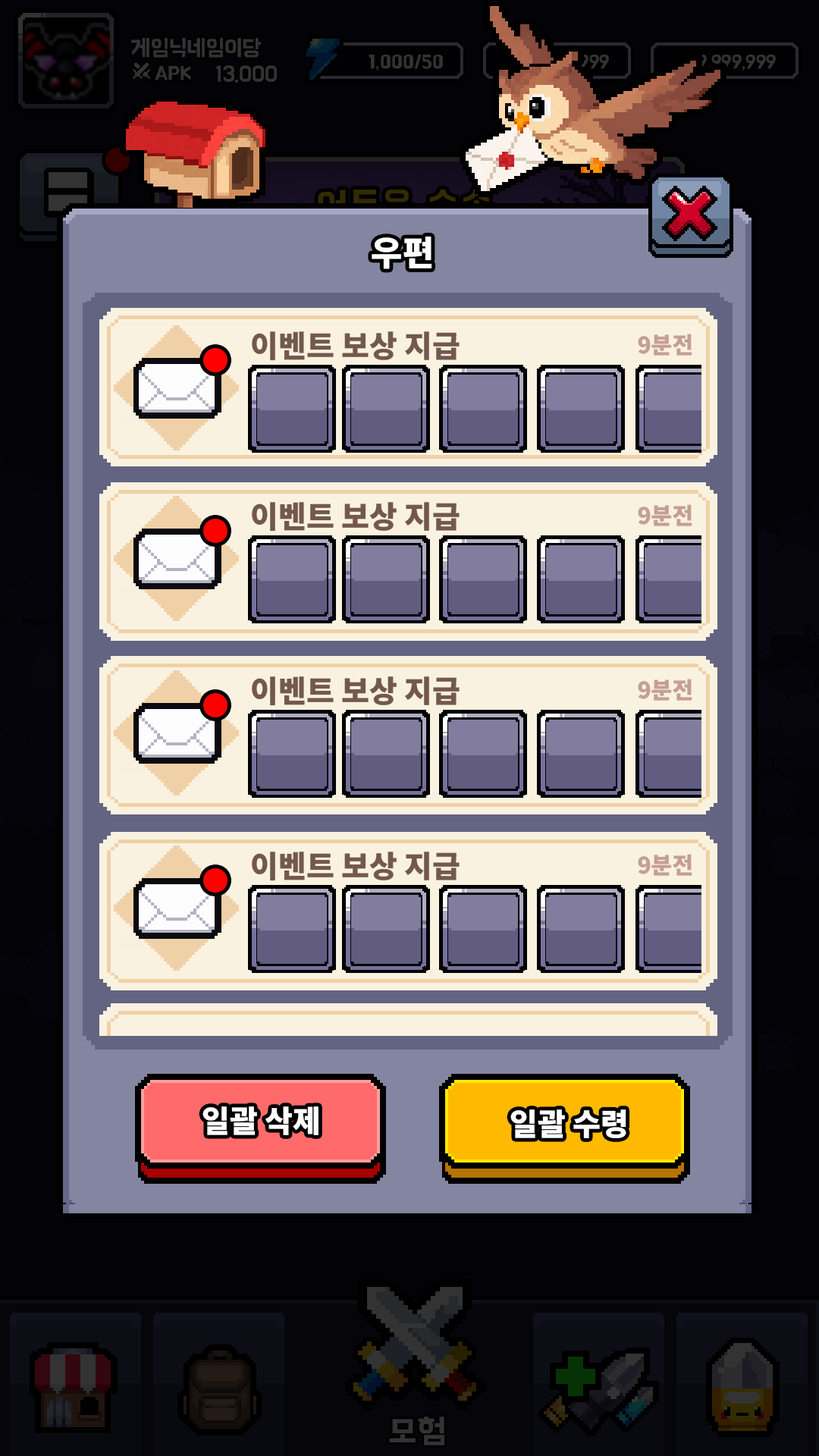
<style>
.page{position:relative;width:819px;height:1456px}
.page>*{position:absolute;margin:0}
.t1{font:34.1px "NotoSansKR-Black";color:#ffffff}
.t2{font:30.3px "NotoSansKR-Black";color:#735850}
.t3{font:22.7px "NotoSansKR-Black";color:#c59f93}
.t4{font:30.3px "NotoSansKR-Black";color:#ffffff}
</style>
<div class="page">
<p class="t1" style="left:372px;top:236px;width:60px;height:33px">우편</p>
<p class="t2" style="left:252px;top:331px;width:208px;height:30px">이벤트 보상 지급</p>
<p class="t3" style="left:638px;top:334px;width:54px;height:22px">9분전</p>
<p class="t4" style="left:202px;top:1106px;width:116px;height:29px">일괄 삭제</p>
<p class="t4" style="left:510px;top:1109px;width:116px;height:29px">일괄 수령</p>
</div>
